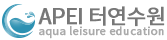
<style>
.page{position:relative;width:167px;height:40px;background:#ffffff}
.page>*{position:absolute;margin:0}
.t1{font:21px "NotoSansCJKkr-Regular";letter-spacing:-0.025em;color:#777777;font-weight:bold}
.t2{font:11px "NotoSansCJKkr-Regular";letter-spacing:0.01em;color:#aaaaaa;font-weight:bold}
</style>
<div class="page">
<p class="t1" style="left:38px;top:6px;width:127px;height:21px">APEI 터연수원</p>
<p class="t2" style="left:39px;top:26px;width:125px;height:13px">aqua leisure education</p>
</div>
